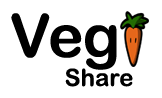
<style>
.page{position:relative;width:162px;height:98px;background:#ffffff}
.page>*{position:absolute;margin:0}
.t1{font:60px "ArialRoundedMTBold";color:#000000}
.t2{font:24px "ArialRoundedMTBold";color:#000000}
</style>
<div class="page">
<p class="t1" style="left:11px;top:13px;width:106px;height:57px">Veg</p>
<p class="t2" style="left:65px;top:68px;width:68px;height:19px">Share</p>
</div>
